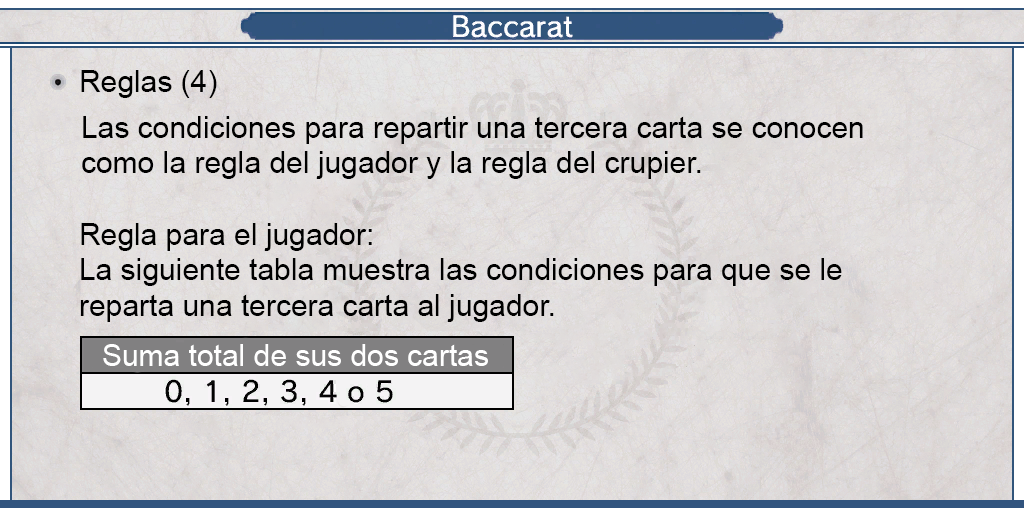
<style>
.page{position:relative;width:1024px;height:512px}
.page>*{position:absolute;margin:0}
.t1{font:29.9px "ArialMT";color:#000000}
.t2{font:29.9px "ArialMT";color:#ffffff}
</style>
<div class="page">
<p class="t1" style="left:81px;top:70px;width:136px;height:28px">Reglas (4)</p>
<p class="t1" style="left:82px;top:116px;width:781px;height:63px;text-align:justify">Las condiciones para repartir una tercera carta se conocen <br>como la regla del jugador y la regla del crupier.</p>
<p class="t1" style="left:80px;top:223px;width:762px;height:99px;text-align:justify">Regla para el jugador:<br>La siguiente tabla muestra las condiciones para que se le <br>reparta una tercera carta al jugador.</p>
<p class="t2" style="left:103px;top:344px;width:385px;height:22px">Suma total de sus dos cartas</p>
</div>
